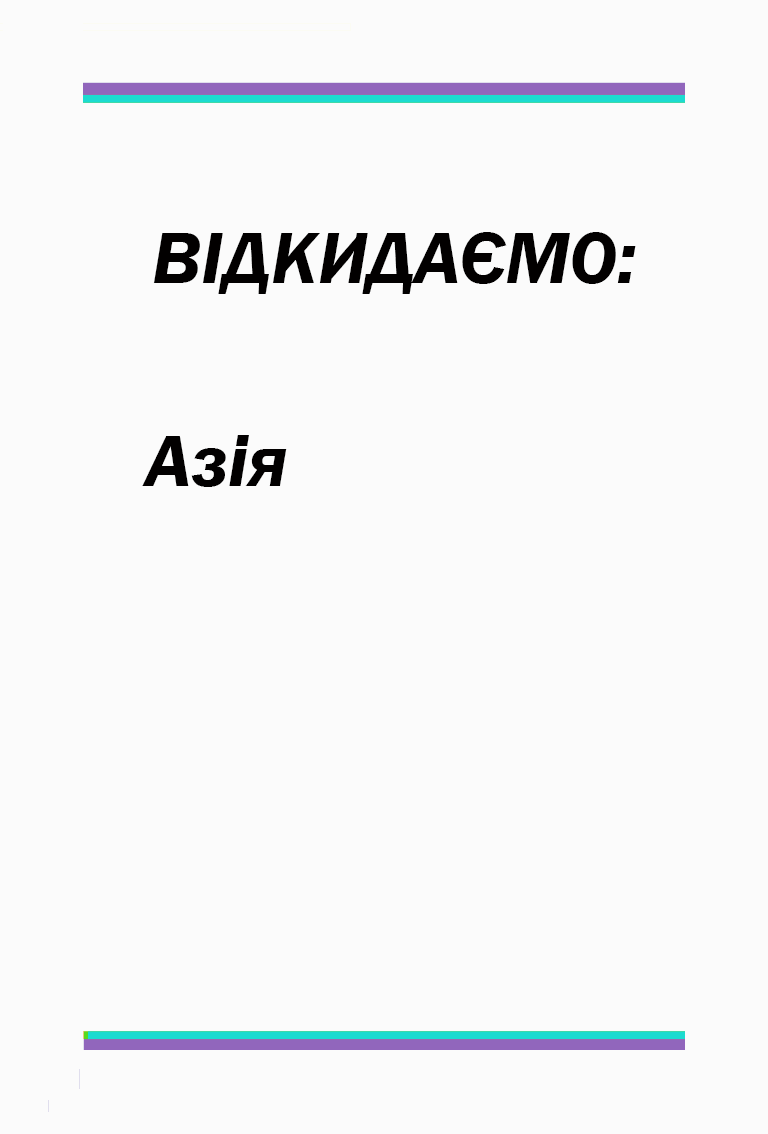
<style>
.page{position:relative;width:768px;height:1134px;background:#fbfbfb}
.page>*{position:absolute;margin:0}
.t1{font:75px "FranklinGothic-DemiItalic";color:#020000}
</style>
<div class="page">
<p class="t1" style="left:153px;top:232px;width:483px;height:62px">ВІДКИДАЄМО:</p>
<p class="t1" style="left:142px;top:435px;width:145px;height:52px">Азія</p>
</div>
